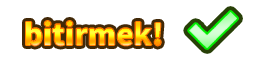
<style>
.page{position:relative;width:256px;height:64px;background:#ffffff}
.page>*{position:absolute;margin:0}
.t1{font:28.9px "Keifont"}
</style>
<div class="page">
<p class="t1" style="left:26px;top:21px;width:135px;height:25px">bitirmek!</p>
</div>
